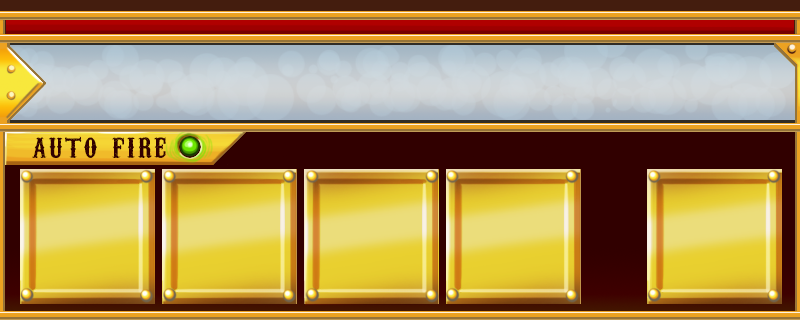
<style>
.page{position:relative;width:800px;height:320px}
.page>*{position:absolute;margin:0}
.t1{font:35.2px "CarnivaleeFreakshow";letter-spacing:0.075em;color:#310000}
</style>
<div class="page">
<p class="t1" style="left:32px;top:136px;width:134px;height:22px">auto fire</p>
</div>
